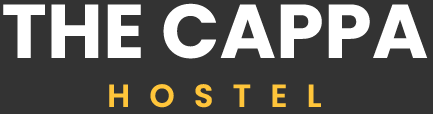
<style>
.page{position:relative;width:433px;height:114px;background:#333333}
.page>*{position:absolute;margin:0}
.t1{font:76px "Poppins-Bold";letter-spacing:0.005em;color:#ffffff}
.t2{font:32px "Poppins-SemiBold";letter-spacing:0.6em;color:#ffc53a}
</style>
<div class="page">
<p class="t1" style="left:3px;top:3px;width:425px;height:56px">THE CAPPA</p>
<p class="t2" style="left:109px;top:84px;width:212px;height:24px">HOSTEL</p>
</div>
